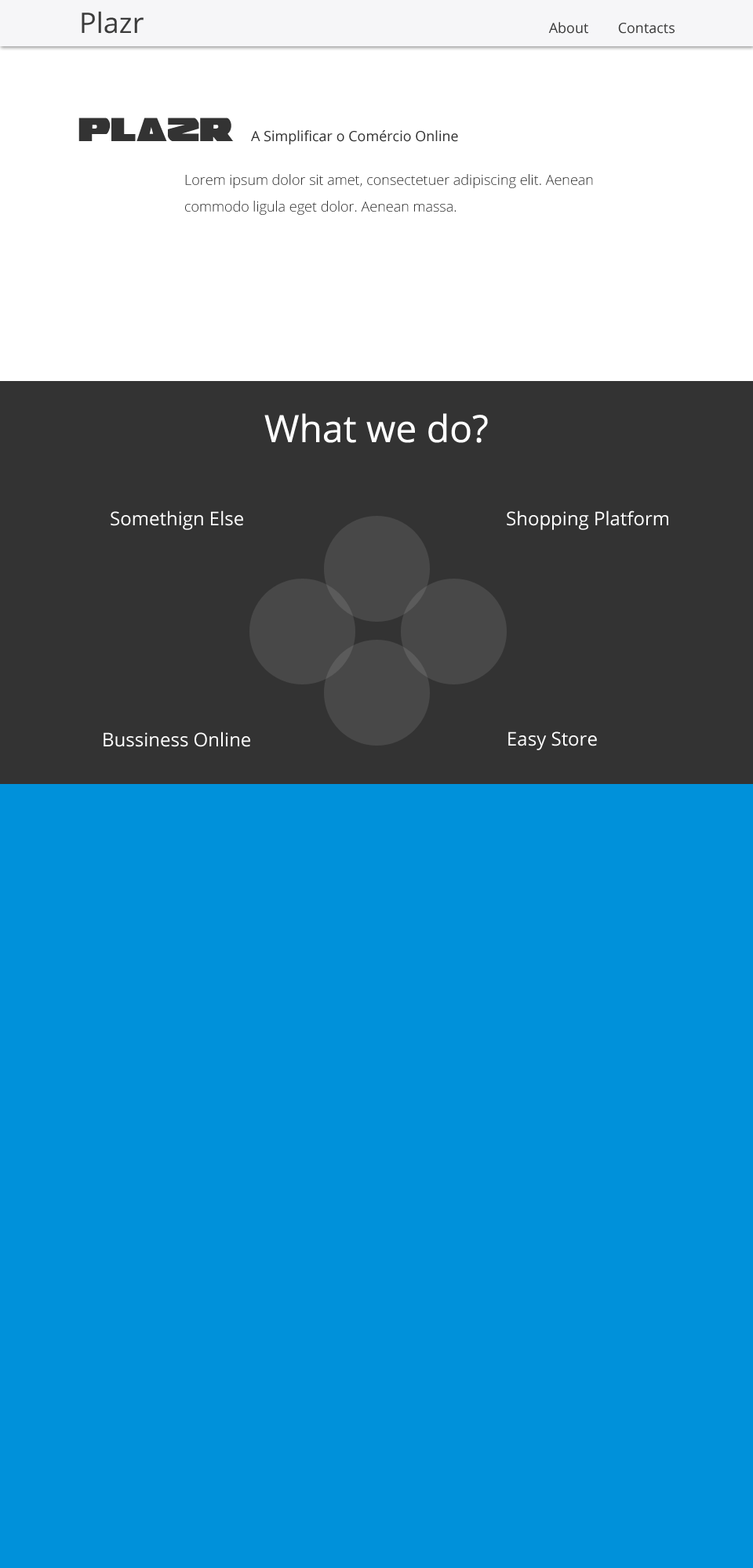
<style>
.page{position:relative;width:753px;height:1568px;background:#0091da}
.page>*{position:absolute;margin:0}
.t1{font:28.2px "OpenSans";color:#3b3b3b}
.t2{font:14.1px "OpenSans";color:#3b3b3b}
.t3{font:37.6px "Guardian";color:#333333}
.t4{font:14.1px "OpenSans";color:#333333}
.t5{font:14.1px/26.7px "OpenSans-Light";color:#333333}
.t6{font:37.6px "OpenSans";color:#ffffff}
.t7{font:18.8px "OpenSans";color:#ffffff}
</style>
<div class="page">
<p class="t1" style="left:82px;top:11px;width:61px;height:23px">Plazr</p>
<p class="t2" style="left:548px;top:22px;width:40px;height:12px">About</p>
<p class="t2" style="left:618px;top:23px;width:56px;height:11px">Contacts</p>
<p class="t3" style="left:78px;top:118px;width:156px;height:23px">Plazr</p>
<p class="t4" style="left:251px;top:130px;width:207px;height:15px">A Simplificar o Comércio Online</p>
<p class="t5" style="left:185px;top:174px;width:408px;height:41px">Lorem ipsum dolor sit amet, consectetuer adipiscing elit. Aenean commodo ligula eget dolor. Aenean massa.</p>
<p class="t6" style="left:264px;top:413px;width:224px;height:30px">What we do?</p>
<p class="t7" style="left:111px;top:510px;width:132px;height:20px">Somethign Else</p>
<p class="t7" style="left:506px;top:510px;width:162px;height:20px">Shopping Platform</p>
<p class="t7" style="left:103px;top:731px;width:147px;height:16px">Bussiness Online</p>
<p class="t7" style="left:508px;top:731px;width:89px;height:19px">Easy Store</p>
</div>
